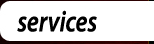
<style>
.page{position:relative;width:154px;height:44px;background:#ffffff}
.page>*{position:absolute;margin:0}
.t1{font:29.6px "MyriadPro-SemiboldIt";color:#000000;scale:0.83 1}
</style>
<div class="page">
<p class="t1" style="left:17px;top:10px;width:80px;height:22px">services</p>
</div>
